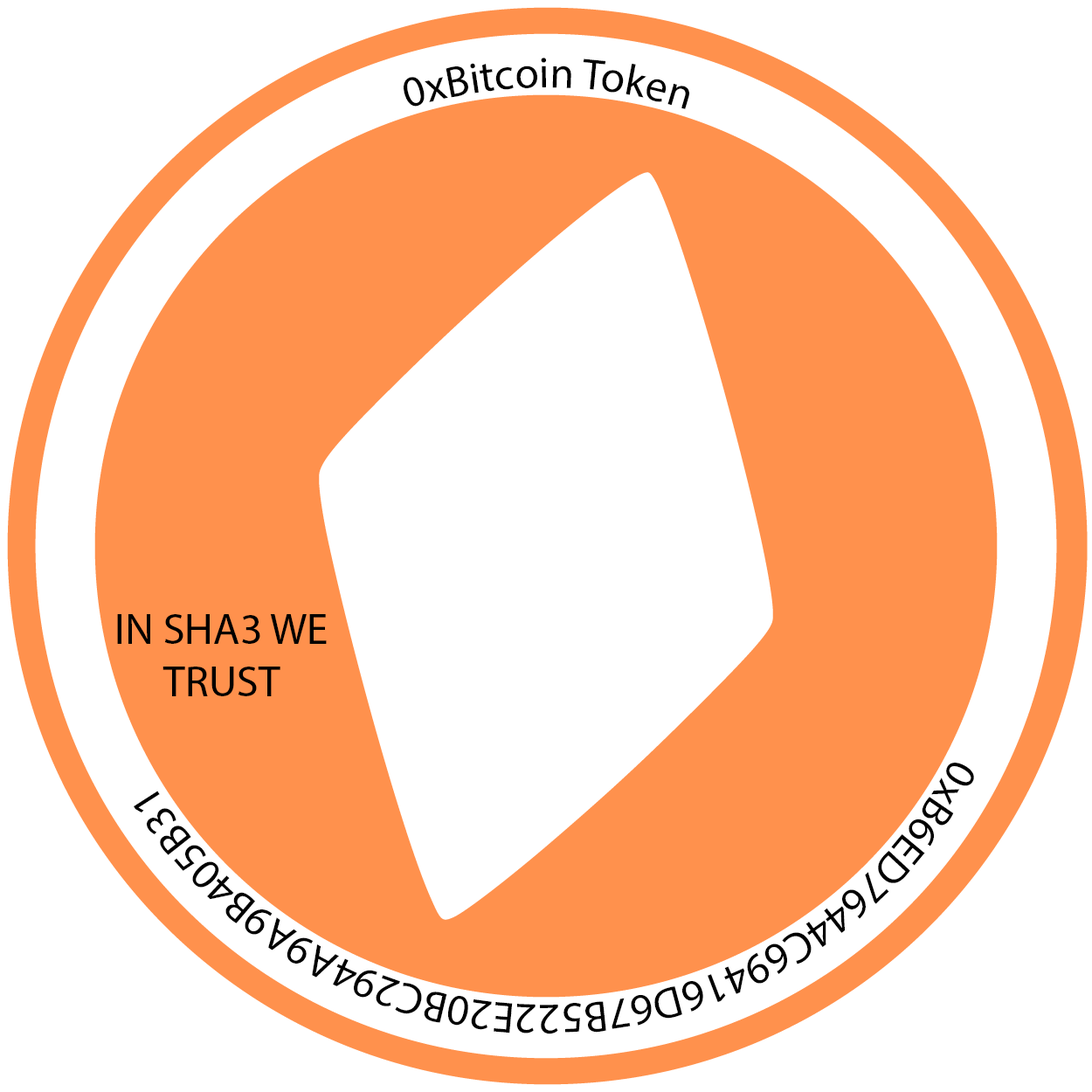
<style>
.page{position:relative;width:1092px;height:1092px;background:#ffffff}
.page>*{position:absolute;margin:0}
.t1{font:43.7px "MyriadPro-Regular";color:#000000}
</style>
<div class="page">
<p class="t1" style="left:134px;top:58px;width:840px;height:976px">0xBitcoin Token                                                                                      0xB6ED7644C69416D67B522E20BC294A9A9B405B31</p>
<p class="t1" style="left:117px;top:614px;width:210px;height:82px;text-align:center">IN SHA3 WE TRUST</p>
</div>
